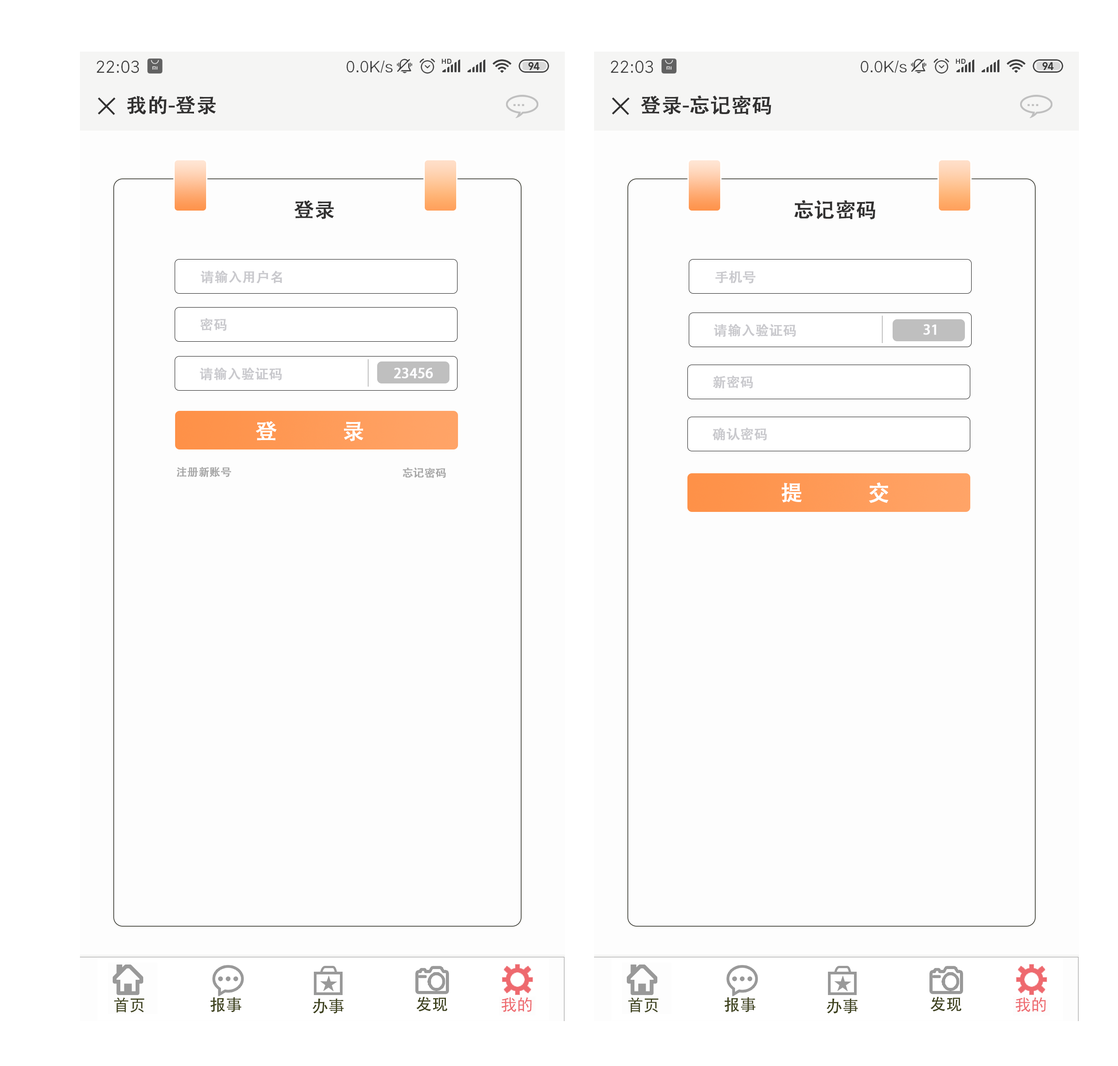
<style>
.page{position:relative;width:1118px;height:1066px;background:#fdfdfd}
.page>*{position:absolute;margin:0}
.t1{font:20.2px "AdobeHeitiStd-Regular";color:#323131;font-weight:bold}
.t2{font:13.5px "AdobeHeitiStd-Regular";color:#c9c9cd;font-weight:bold}
.t3{font:13.5px "AdobeHeitiStd-Regular";color:#fdfdff;font-weight:bold}
.t4{font:21.6px "AdobeHeitiStd-Regular";color:#ffffff;font-weight:bold}
.t5{font:10.8px "AdobeHeitiStd-Regular";color:#a6a6a6;font-weight:bold}
</style>
<div class="page">
<p class="t1" style="left:127px;top:96px;width:89px;height:19px">我的-登录</p>
<p class="t1" style="left:641px;top:95px;width:131px;height:20px">登录-忘记密码</p>
<p class="t1" style="left:294px;top:200px;width:40px;height:19px">登录</p>
<p class="t1" style="left:795px;top:200px;width:81px;height:20px">忘记密码</p>
<p class="t2" style="left:201px;top:270px;width:81px;height:14px">请输入用户名</p>
<p class="t2" style="left:715px;top:270px;width:41px;height:14px">手机号</p>
<p class="t2" style="left:200px;top:318px;width:27px;height:13px">密码</p>
<p class="t2" style="left:714px;top:324px;width:82px;height:13px">请输入验证码</p>
<p class="t3" style="left:923px;top:324px;width:13px;height:11px">31</p>
<p class="t2" style="left:200px;top:367px;width:82px;height:14px">请输入验证码</p>
<p class="t3" style="left:394px;top:368px;width:39px;height:11px">23456</p>
<p class="t2" style="left:713px;top:375px;width:40px;height:14px">新密码</p>
<p class="t4" style="left:256px;top:421px;width:107px;height:20px">登            录</p>
<p class="t2" style="left:713px;top:428px;width:54px;height:13px">确认密码</p>
<p class="t5" style="left:177px;top:467px;width:54px;height:10px">注册新账号</p>
<p class="t5" style="left:403px;top:468px;width:43px;height:10px">忘记密码</p>
<p class="t4" style="left:782px;top:482px;width:107px;height:21px">提            交</p>
</div>
